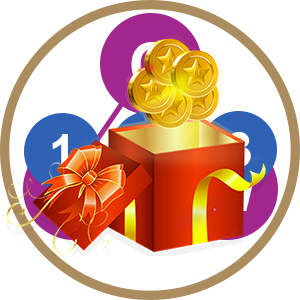
<style>
.page{position:relative;width:300px;height:300px;background:#ffffff}
.page>*{position:absolute;margin:0}
.t1{font:60px "Arial-BoldMT"}
.t2{font:48px "Arial-BoldMT";color:#fefefe}
.t3{font:48px "Arial-BoldMT"}
</style>
<div class="page">
<p class="t1" style="left:131px;top:42px;width:43px;height:45px">O</p>
<p class="t2" style="left:52px;top:134px;width:16px;height:35px">1</p>
<p class="t3" style="left:227px;top:132px;width:24px;height:35px">3</p>
</div>
